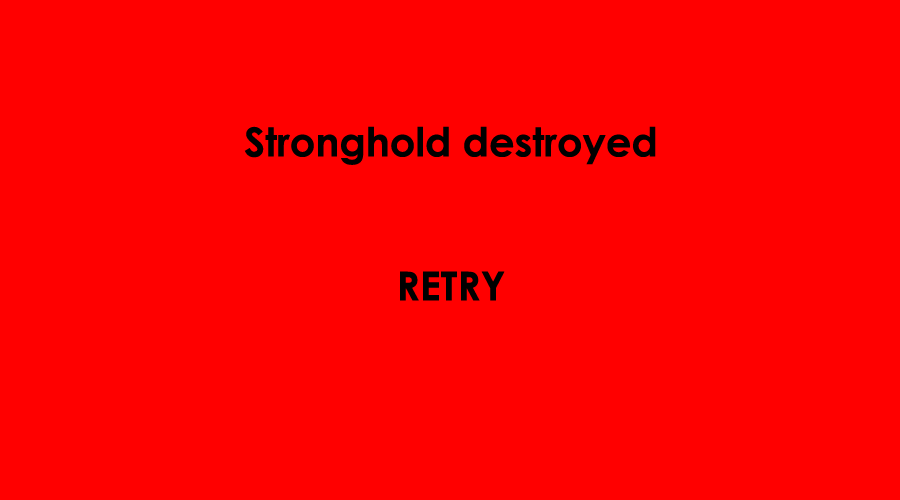
<style>
.page{position:relative;width:900px;height:500px;background:#ff0000}
.page>*{position:absolute;margin:0}
.t1{font:40px "CenturyGothic-Bold";color:#000000}
</style>
<div class="page">
<p class="t1" style="left:244px;top:126px;width:412px;height:175px;text-align:center">Stronghold destroyed<br><br><br>RETRY</p>
</div>
